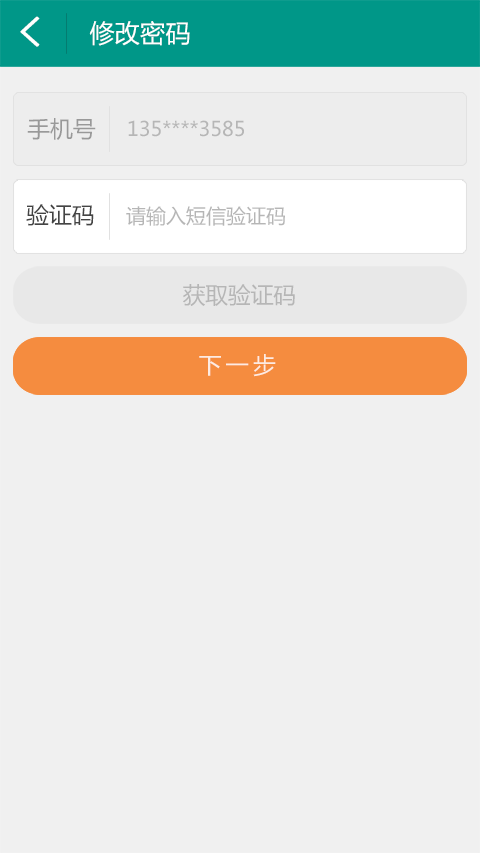
<style>
.page{position:relative;width:480px;height:853px;background:#f0f0f0}
.page>*{position:absolute;margin:0}
.t1{font:41.3px "SimHei";color:#ffffff;font-weight:bold}
.t2{font:25.3px "MicrosoftYaHei";color:#ffffff}
.t3{font:22.7px "MicrosoftYaHei";color:#999999}
.t4{font:20px "MicrosoftYaHei";color:#b6b6b6}
.t5{font:22.7px "MicrosoftYaHei";color:#444444}
.t6{font:22.7px "MicrosoftYaHei";color:#b6b6b6}
.t7{font:22.7px "MicrosoftYaHei";letter-spacing:0.2em;color:#fdebe2}
</style>
<div class="page">
<p class="t1" style="left:20px;top:16px;width:20px;height:31px">&lt;</p>
<p class="t2" style="left:89px;top:21px;width:101px;height:25px">修改密码</p>
<p class="t3" style="left:27px;top:118px;width:69px;height:22px">手机号</p>
<p class="t4" style="left:128px;top:120px;width:116px;height:17px">135****3585</p>
<p class="t5" style="left:26px;top:204px;width:68px;height:22px">验证码</p>
<p class="t4" style="left:126px;top:206px;width:159px;height:20px">请输入短信验证码</p>
<p class="t6" style="left:183px;top:284px;width:112px;height:22px">获取验证码</p>
<p class="t7" style="left:199px;top:354px;width:77px;height:23px">下一步</p>
</div>
